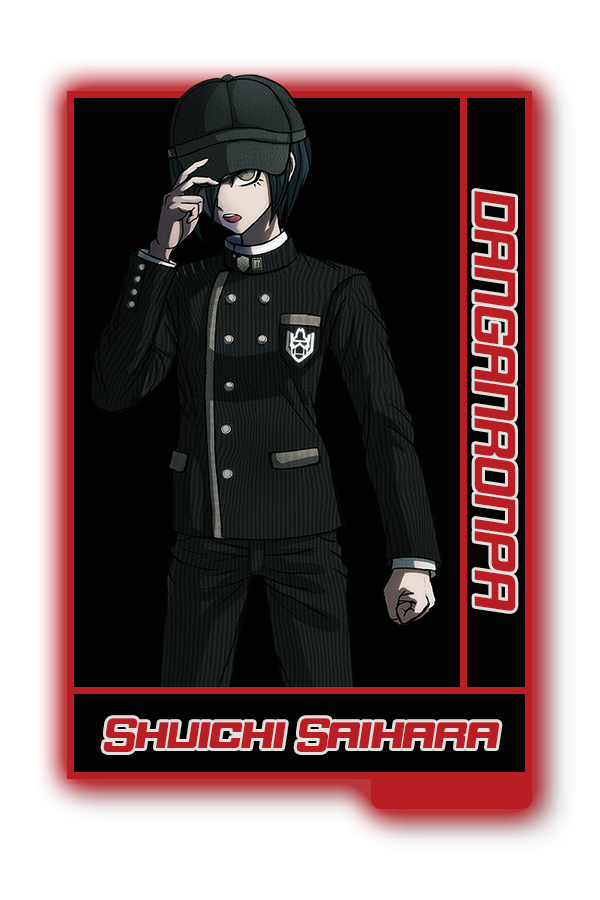
<style>
.page{position:relative;width:600px;height:900px;background:#020202}
.page>*{position:absolute;margin:0}
.t1{font:48.8px "DorBlue";color:#bb2c2e}
.t2{font:40.6px "DorBlue";color:#bb2c2e}
</style>
<div class="page">
<p class="t1" style="left:474px;top:191px;width:42px;height:420px;rotate:90deg">DANGANRONPA</p>
<p class="t2" style="left:103px;top:718px;width:397px;height:34px">Shuichi Saihara</p>
</div>
